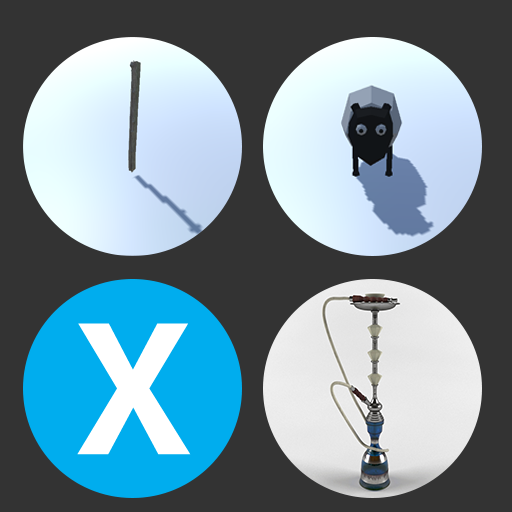
<style>
.page{position:relative;width:512px;height:512px;background:#333333}
.page>*{position:absolute;margin:0}
.t1{font:183.6px "Roboto-Bold";color:#ffffff}
</style>
<div class="page">
<p class="t1" style="left:77px;top:323px;width:114px;height:132px">X</p>
</div>
